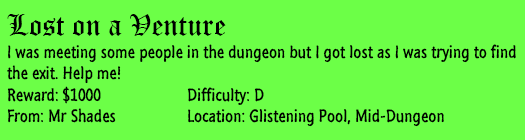
<style>
.page{position:relative;width:525px;height:140px;background:#6cff47}
.page>*{position:absolute;margin:0}
.t1{font:18px "SegoeMarker";color:#000000}
.t2{font:30px "OldEnglishTextMT";color:#000000}
</style>
<div class="page">
<p class="t1" style="left:7px;top:14px;width:509px;height:113px"><span class="t2">Lost on a Venture<br></span>I was meeting some people in the dungeon but I got lost as I was trying to find<br>the exit. Help me!<br>Reward: $1000   Difficulty: D<br>From: Mr Shades  Location: Glistening Pool, Mid-Dungeon</p>
</div>
